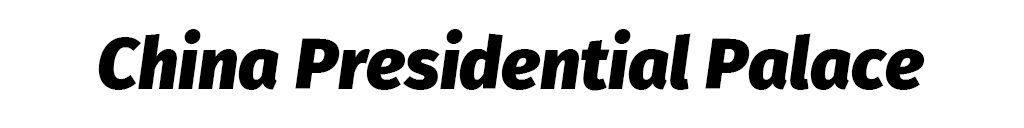
<style>
.page{position:relative;width:1024px;height:128px;background:#ffffff}
.page>*{position:absolute;margin:0}
.t1{font:71.8px "FiraSans-BlackItalic";color:#000000}
</style>
<div class="page">
<p class="t1" style="left:98px;top:29px;width:827px;height:62px">China Presidential Palace</p>
</div>
